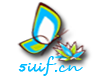
<style>
.page{position:relative;width:104px;height:82px;background:#ffffff}
.page>*{position:absolute;margin:0}
.t1{font:10.4px "SegoeScript";color:#01baff;font-weight:bold;scale:1.1 1}
.t2{font:19.5px "SegoeScript";color:#01baff;scale:1.1 1}
.t3{font:14px "SegoeScript";color:#01baff;scale:1.19 1}
</style>
<div class="page">
<p class="t1" style="left:18px;top:56px;width:39px;height:20px">5ili<span class="t2">f</span></p>
<p class="t3" style="left:55px;top:65px;width:28px;height:7px">.cn</p>
</div>
